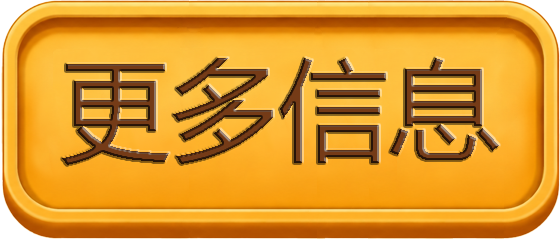
<style>
.page{position:relative;width:560px;height:240px}
.page>*{position:absolute;margin:0}
.t1{font:109.3px "MicrosoftYaHeiUI"}
</style>
<div class="page">
<p class="t1" style="left:62px;top:58px;width:437px;height:107px">更多信息</p>
</div>
